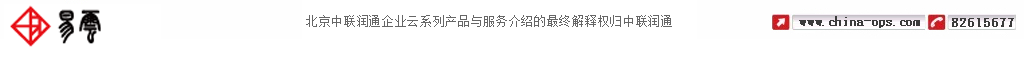
<style>
.page{position:relative;width:1024px;height:59px;background:#ffffff}
.page>*{position:absolute;margin:0}
.t1{font:13px "SimSun";letter-spacing:-0.025em;color:#666666}
.t2{font:14px "·ÂËÎ-Regular";letter-spacing:-0.05em;color:#3b3b3b;font-weight:bold}
.t3{font:14px "·ÂËÎ-Regular";color:#3b3b3b;font-weight:bold}
.t4{font:14px "·ÂËÎ-Regular";letter-spacing:-0.1em;color:#3b3b3b;font-weight:bold}
</style>
<div class="page">
<p class="t1" style="left:306px;top:15px;width:366px;height:12px">北京中联润通企业云系列产品与服务介绍的最终解释权归中联润通</p>
<p class="t2" style="left:799px;top:16px;width:121px;height:12px"><span class="t3">ww</span><span class="t4">w.c</span>hina-op<span class="t4">s.c</span><span class="t3">om</span></p>
<p class="t3" style="left:952px;top:18px;width:62px;height:9px">82615677</p>
</div>
